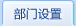
<style>
.page{position:relative;width:76px;height:26px}
.page>*{position:absolute;margin:0}
.t1{font:12px "MicrosoftYaHei";color:#15428b}
</style>
<div class="page">
<p class="t1" style="left:14px;top:7px;width:48px;height:13px">部门设置</p>
</div>
